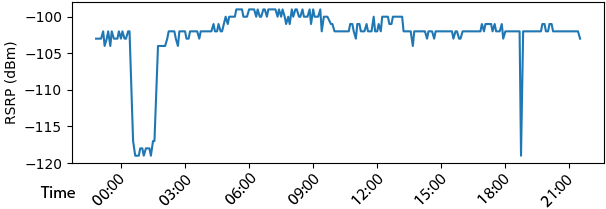
<style>
.page{position:relative;width:606px;height:209px;background:#ffffff}
.page>*{position:absolute;margin:0}
.t1{font:16.7px "MyriadPro-Regular";color:#000000}
</style>
<div class="page">
<p class="t1" style="left:92px;top:174px;width:32px;height:32px;rotate:-45deg">00:00</p>
<p class="t1" style="left:225px;top:173px;width:31px;height:32px;rotate:-45deg">06:00</p>
<p class="t1" style="left:288px;top:174px;width:31px;height:31px;rotate:-45deg">09:00</p>
<p class="t1" style="left:351px;top:174px;width:32px;height:31px;rotate:-45deg">12:00</p>
<p class="t1" style="left:414px;top:174px;width:32px;height:31px;rotate:-45deg">15:00</p>
<p class="t1" style="left:477px;top:174px;width:32px;height:30px;rotate:-45deg">18:00</p>
<p class="t1" style="left:159px;top:175px;width:32px;height:31px;rotate:-45deg">03:00</p>
<p class="t1" style="left:540px;top:175px;width:32px;height:33px;rotate:-45deg">21:00</p>
<p class="t1" style="left:40px;top:186px;width:35px;height:12px">Time</p>
</div>
